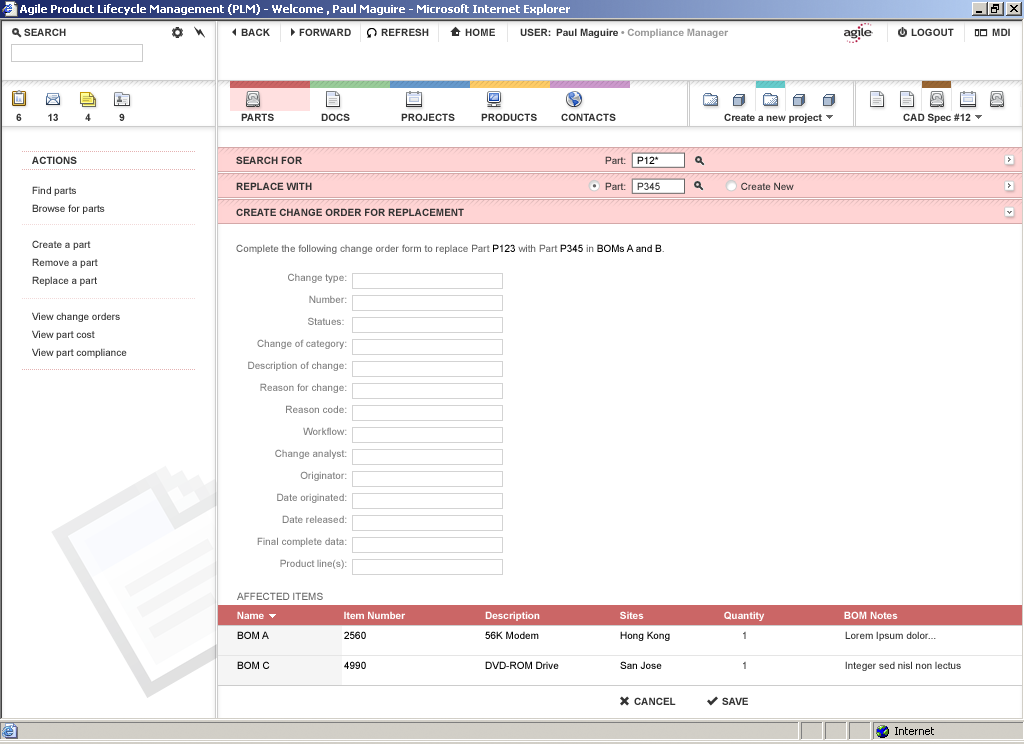
<style>
.page{position:relative;width:1024px;height:744px;background:#ffffff}
.page>*{position:absolute;margin:0}
.t1{font:10px "Arial-BoldMT";color:#333333}
.t2{font:10px "ArialMT"}
.t3{font:10px "ArialMT";color:#000000}
.t4{font:10px "ArialMT";color:#333333}
.t5{font:10px/18px "ArialMT";color:#333333}
.t6{font:10px "ArialMT";color:#666666}
.t7{font:10px/22px "ArialMT";color:#7f7f7f}
.t8{font:10px "Arial-BoldMT";color:#ffffff}
.t9{font:10px/10px "ArialMT";color:#000000}
.t10{font:10px/10px "ArialMT"}
.t11{font:10px/10px "ArialMT";color:#333333}
</style>
<div class="page">
<p class="t1" style="left:32px;top:156px;width:45px;height:8px">ACTIONS</p>
<p class="t1" style="left:236px;top:156px;width:66px;height:8px">SEARCH FOR</p>
<p class="t2" style="left:605px;top:156px;width:21px;height:8px">Part:</p>
<p class="t3" style="left:637px;top:156px;width:22px;height:8px">P12*</p>
<p class="t1" style="left:236px;top:182px;width:76px;height:8px">REPLACE WITH</p>
<p class="t4" style="left:605px;top:182px;width:189px;height:8px">Part:             Create New</p>
<p class="t4" style="left:637px;top:182px;width:23px;height:8px">P345</p>
<p class="t5" style="left:32px;top:186px;width:95px;height:172px">Find parts<br>Browse for parts<br><br>Create a part<br>Remove a part<br>Replace a part<br><br>View change orders<br>View part cost<br>View part compliance</p>
<p class="t1" style="left:236px;top:208px;width:228px;height:8px">CREATE CHANGE ORDER FOR REPLACEMENT</p>
<p class="t6" style="left:236px;top:244px;width:428px;height:10px">Complete the following change order form to replace Part <span class="t3">P123</span> with Part <span class="t3">P345</span> in <span class="t3">BOMs A and B</span>.</p>
<p class="t7" style="left:248px;top:273px;width:99px;height:296px;text-align:right">Change type:<br>Number:<br>Statues: <br>Change of category:<br>Description of change:<br>Reason for change:<br>Reason code:<br>Workflow:<br>Change analyst:<br>Originator:<br>Date originated:<br>Date released:<br>Final complete data:<br>Product line(s):</p>
<p class="t6" style="left:237px;top:592px;width:86px;height:8px">AFFECTED ITEMS</p>
<p class="t8" style="left:237px;top:611px;width:27px;height:8px">Name</p>
<p class="t8" style="left:344px;top:611px;width:62px;height:8px">Item Number</p>
<p class="t8" style="left:485px;top:611px;width:55px;height:10px">Description</p>
<p class="t8" style="left:620px;top:611px;width:24px;height:8px">Sites</p>
<p class="t8" style="left:724px;top:611px;width:41px;height:10px">Quantity</p>
<p class="t8" style="left:844px;top:611px;width:54px;height:8px">BOM Notes</p>
<p class="t9" style="left:237px;top:631px;width:33px;height:38px">BOM A<br><br><br>BOM C</p>
<p class="t9" style="left:344px;top:631px;width:22px;height:38px">2560<br><br><br>4990</p>
<p class="t9" style="left:485px;top:631px;width:74px;height:38px">56K Modem<br><br><br>DVD-ROM Drive</p>
<p class="t9" style="left:620px;top:631px;width:50px;height:38px">Hong Kong<br><br><br>San Jose</p>
<p class="t10" style="left:743px;top:631px;width:3px;height:38px">1<br><br><br>1</p>
<p class="t11" style="left:845px;top:631px;width:116px;height:40px">Lorem Ipsum dolor...<br><br><br>Integer sed nisl non lectus</p>
<p class="t1" style="left:634px;top:697px;width:42px;height:8px">CANCEL</p>
<p class="t1" style="left:722px;top:697px;width:26px;height:8px">SAVE</p>
</div>
